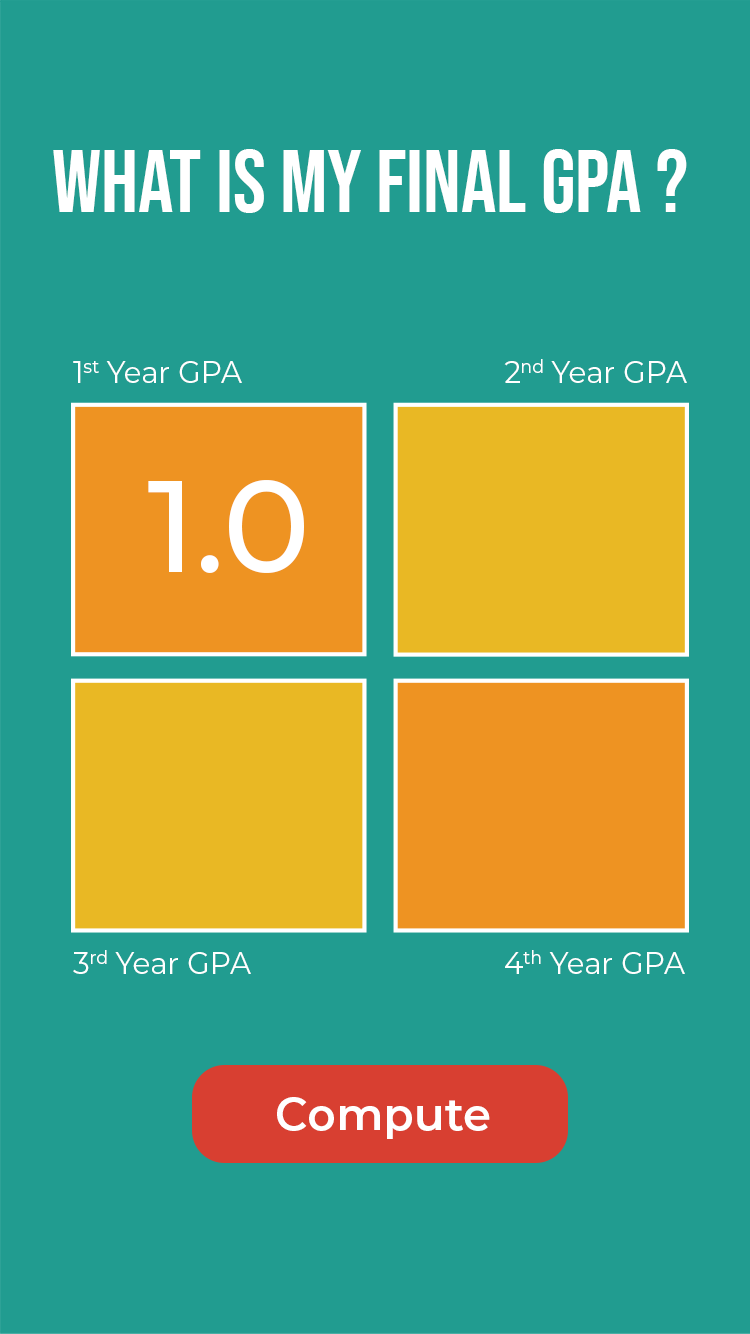
<style>
.page{position:relative;width:750px;height:1334px;background:#219c90}
.page>*{position:absolute;margin:0}
.t1{font:88.3px "BebasNeue-Regular";color:#ffffff}
.t2{font:30.3px "Montserrat-Regular";color:#ffffff}
.t3{font:130.2px "Montserrat-Medium";color:#ffffff}
.t4{font:45.2px "Montserrat-SemiBold";color:#ffffff}
</style>
<div class="page">
<p class="t1" style="left:53px;top:149px;width:634px;height:64px">What is my final GPA ?</p>
<p class="t2" style="left:73px;top:361px;width:169px;height:22px">1st Year GPA</p>
<p class="t2" style="left:504px;top:359px;width:183px;height:24px">2nd Year GPA</p>
<p class="t3" style="left:148px;top:480px;width:156px;height:93px">1.0</p>
<p class="t2" style="left:73px;top:950px;width:178px;height:24px">3rd Year GPA</p>
<p class="t2" style="left:505px;top:950px;width:180px;height:24px">4th Year GPA</p>
<p class="t4" style="left:277px;top:1097px;width:213px;height:42px">Compute</p>
</div>
